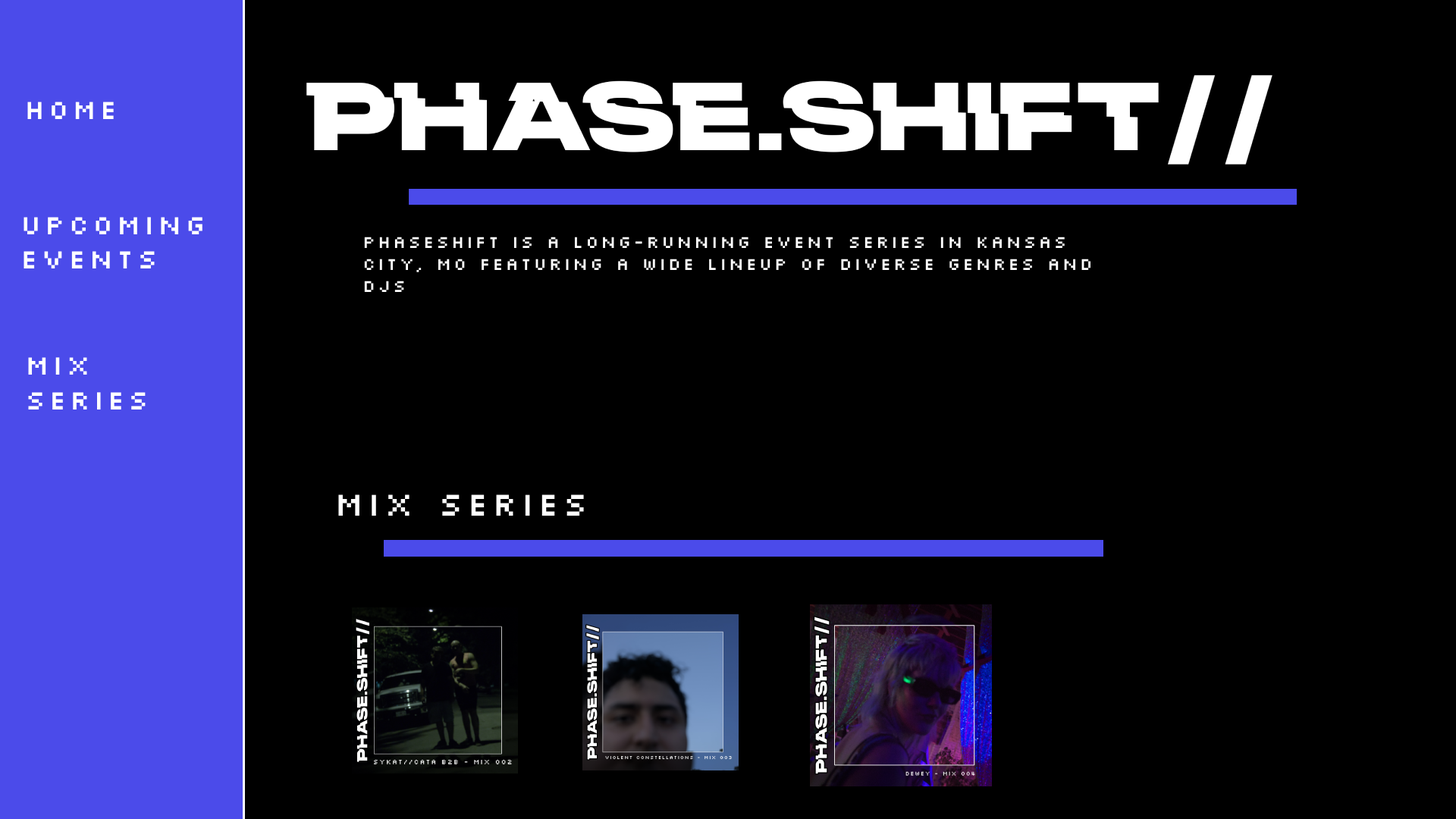
<style>
.page{position:relative;width:1456px;height:819px;background:#000000}
.page>*{position:absolute;margin:0}
.t1{font:28.8px "Silkscreen-Expanded";color:#ffffff}
.t2{font:18.2px "Silkscreen-Expanded";color:#ffffff}
.t3{font:34.9px "Silkscreen-Expanded";color:#ffffff}
</style>
<div class="page">
<p class="t1" style="left:27px;top:102px;width:87px;height:17px">Home</p>
<p class="t1" style="left:24px;top:217px;width:178px;height:51px">Upcoming<br>Events</p>
<p class="t2" style="left:364px;top:237px;width:727px;height:55px">Phaseshift is a long-running event series in Kansas City, MO featuring a wide lineup of diverse genres and DJS</p>
<p class="t1" style="left:28px;top:357px;width:118px;height:52px">Mix <br>Series</p>
<p class="t3" style="left:338px;top:494px;width:246px;height:22px">Mix series</p>
</div>
